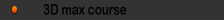
<style>
.page{position:relative;width:224px;height:20px;background:#333333}
.page>*{position:absolute;margin:0}
.t1{font:14.9px "ArialRoundedMTBold";color:#030303;scale:0.78 1}
</style>
<div class="page">
<p class="t1" style="left:43px;top:4px;width:83px;height:11px">3D max course</p>
</div>
